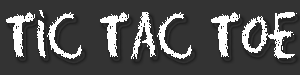
<style>
.page{position:relative;width:300px;height:75px;background:#333333}
.page>*{position:absolute;margin:0}
.t1{font:59px "Eraser-Regular";color:#ffffff;scale:0.73 1}
</style>
<div class="page">
<p class="t1" style="left:6px;top:10px;width:291px;height:49px">Tic Tac Toe</p>
</div>
